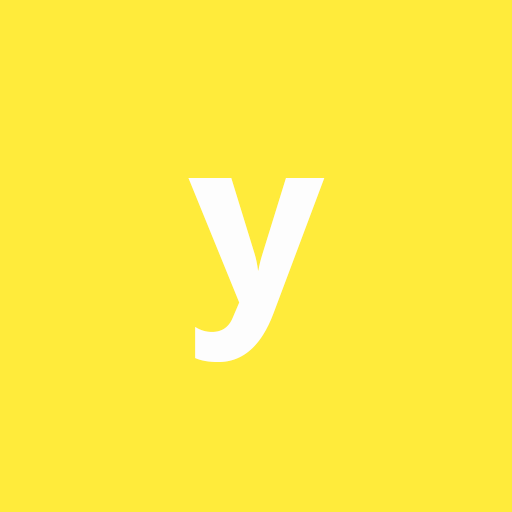
<style>
.page{position:relative;width:512px;height:512px;background:#ffeb3b}
.page>*{position:absolute;margin:0}
.t1{font:250px "Gadugi-Bold";color:#fefefe}
</style>
<div class="page">
<p class="t1" style="left:188px;top:178px;width:137px;height:184px">y</p>
</div>
